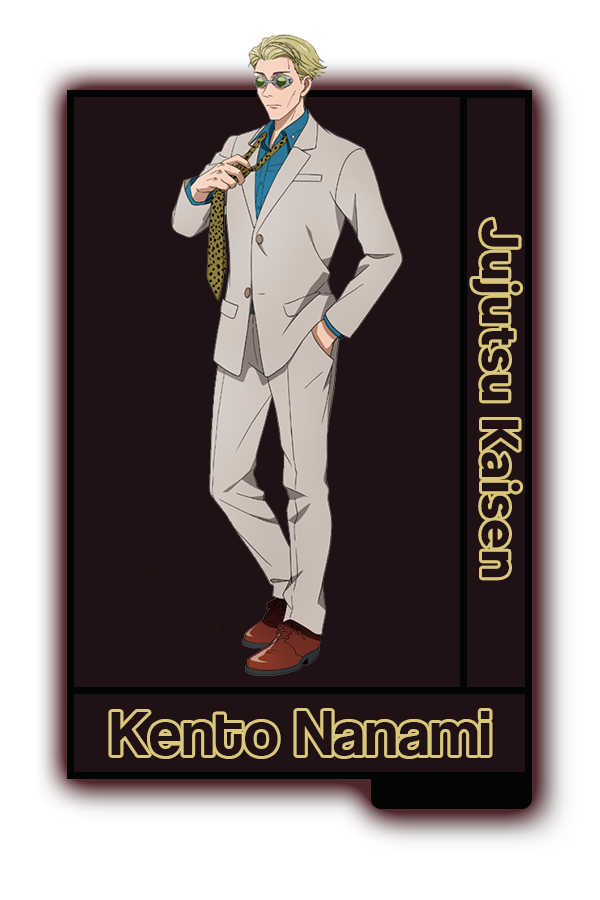
<style>
.page{position:relative;width:600px;height:900px;background:#1f1114}
.page>*{position:absolute;margin:0}
.t1{font:52px "MADETOMMY-Bold";color:#1e1214}
.t2{font:65.2px "CoolveticaRg-Regular";color:#1e1214}
</style>
<div class="page">
<p class="t1" style="left:472px;top:219px;width:49px;height:359px;rotate:90deg">Jujutsu Kaisen</p>
<p class="t2" style="left:111px;top:711px;width:379px;height:45px">Kento Nanami</p>
</div>
